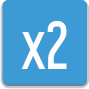
<style>
.page{position:relative;width:89px;height:89px;background:#3c9bd5}
.page>*{position:absolute;margin:0}
.t1{font:60px "LibelSuitRg-Regular";color:#ffffff}
</style>
<div class="page">
<p class="t1" style="left:21px;top:21px;width:46px;height:48px">x2</p>
</div>
